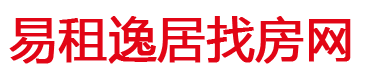
<style>
.page{position:relative;width:371px;height:82px;background:#ffffff}
.page>*{position:absolute;margin:0}
.t1{font:48px "MicrosoftYaHei";color:#e20515;font-weight:bold}
</style>
<div class="page">
<p class="t1" style="left:9px;top:16px;width:342px;height:48px">易租逸居找房网</p>
</div>
